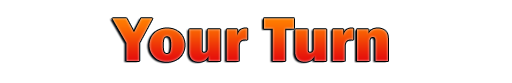
<style>
.page{position:relative;width:512px;height:83px;background:#ffffff}
.page>*{position:absolute;margin:0}
.t1{font:64px "FranklinGothic-Heavy"}
</style>
<div class="page">
<p class="t1" style="left:112px;top:18px;width:276px;height:44px">Your Turn</p>
</div>
